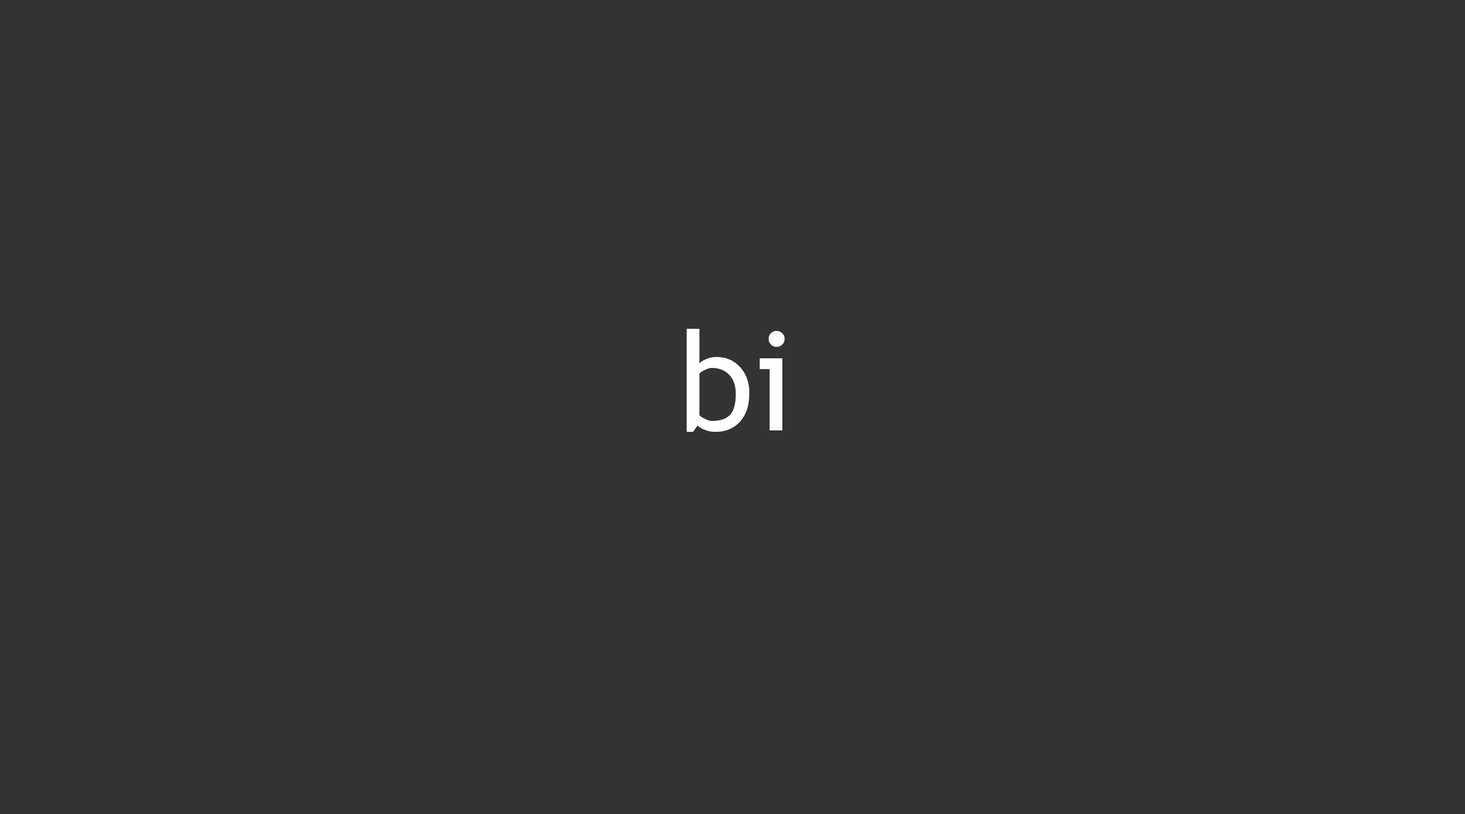
<style>
.page{position:relative;width:1465px;height:814px;background:#333333}
.page>*{position:absolute;margin:0}
.t1{font:137.8px "TrebuchetMS";color:#ffffff}
</style>
<div class="page">
<p class="t1" style="left:686px;top:328px;width:99px;height:104px">bi</p>
</div>
